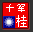
<style>
.page{position:relative;width:33px;height:32px;background:#f20000}
.page>*{position:absolute;margin:0}
.t1{font:10.4px "SimSun";color:#ffffff}
.t2{font:11.7px "SimSun";color:#ffffff}
</style>
<div class="page">
<p class="t1" style="left:6px;top:4px;width:19px;height:8px">十军</p>
<p class="t2" style="left:16px;top:15px;width:11px;height:12px">桂</p>
</div>
